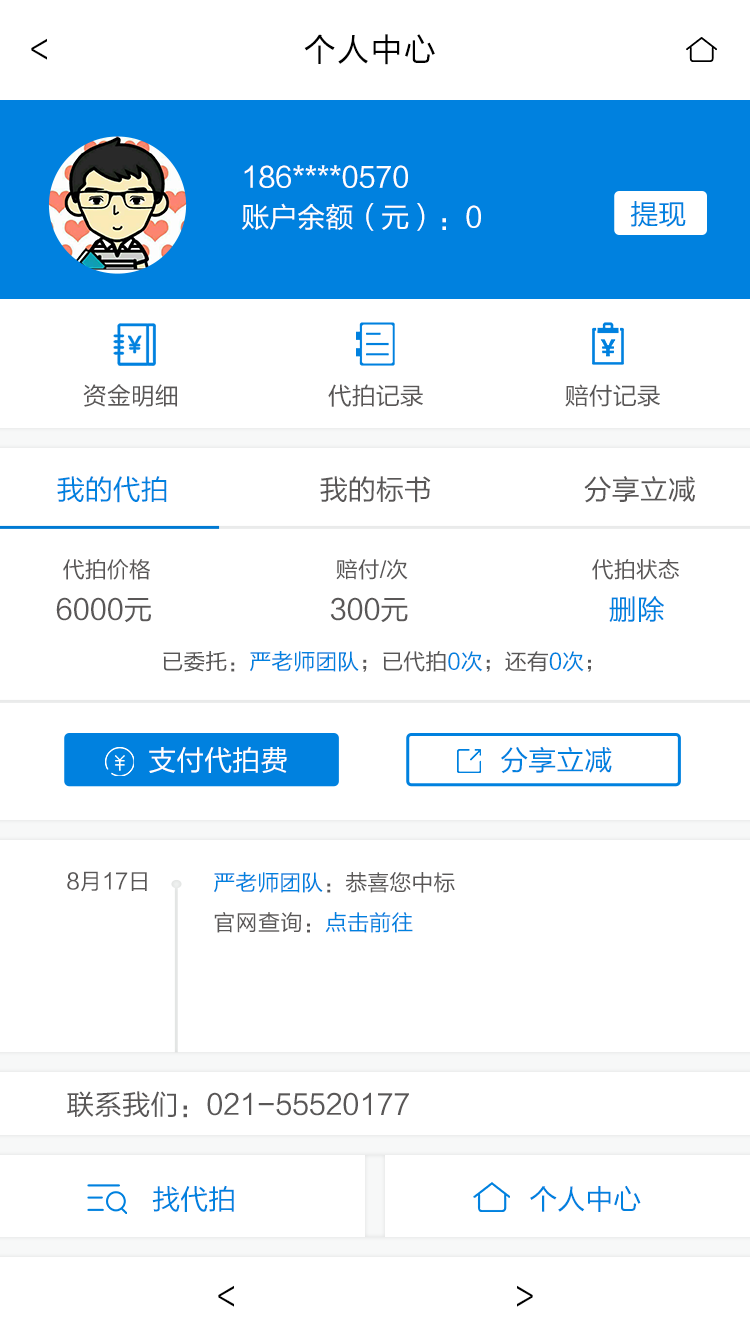
<style>
.page{position:relative;width:750px;height:1334px;background:#ffffff}
.page>*{position:absolute;margin:0}
.t1{font:30px "FZLTHJW--GB1-0";letter-spacing:0.05em;color:#000000}
.t2{font:32px "FZLTHJW--GB1-0";letter-spacing:0.05em;color:#000000}
.t3{font:28px/40px "FZLTHJW--GB1-0";color:#ffffff}
.t4{font:28px "FZLTHJW--GB1-0";color:#0081df}
.t5{font:24px "FZLTHJW--GB1-0";color:#595757}
.t6{font:28px "FZLTHJW--GB1-0";color:#595757}
.t7{font:22px "FZLTHJW--GB1-0";color:#595757}
.t8{font:22px "FZLTHJW--GB1-0";color:#0081df}
.t9{font:28px "FZLTHJW--GB1-0";color:#ffffff}
.t10{font:22px/40px "FZLTHJW--GB1-0";color:#595757}
.t11{font:22px/40px "FZLTHJW--GB1-0";color:#0081df}
.t12{font:22px/40px "FZLTHJW--GB1-0";letter-spacing:0.02em;color:#595757}
</style>
<div class="page">
<p class="t1" style="left:31px;top:38px;width:16px;height:22px;rotate:180deg">&gt;</p>
<p class="t2" style="left:304px;top:34px;width:131px;height:31px">个人中心</p>
<p class="t3" style="left:242px;top:165px;width:239px;height:66px">186****0570<br>账户余额（元）：0</p>
<p class="t4" style="left:631px;top:201px;width:55px;height:26px">提现</p>
<p class="t5" style="left:83px;top:384px;width:94px;height:23px">资金明细</p>
<p class="t5" style="left:328px;top:384px;width:95px;height:23px">代拍记录</p>
<p class="t5" style="left:565px;top:384px;width:95px;height:23px">赔付记录</p>
<p class="t4" style="left:57px;top:476px;width:110px;height:27px">我的代拍</p>
<p class="t6" style="left:320px;top:476px;width:111px;height:27px">我的标书</p>
<p class="t6" style="left:584px;top:476px;width:111px;height:27px">分享立减</p>
<p class="t7" style="left:63px;top:559px;width:87px;height:21px">代拍价格</p>
<p class="t7" style="left:336px;top:559px;width:72px;height:21px">赔付/次</p>
<p class="t7" style="left:592px;top:559px;width:87px;height:21px">代拍状态</p>
<p class="t6" style="left:56px;top:597px;width:95px;height:26px">6000元</p>
<p class="t6" style="left:330px;top:597px;width:78px;height:26px">300元</p>
<p class="t4" style="left:609px;top:596px;width:55px;height:26px">删除</p>
<p class="t8" style="left:163px;top:651px;width:428px;height:21px"><span class="t7">已委托：</span>严老师团队<span class="t7">；已代拍</span>0次<span class="t7">；还有</span>0次<span class="t7">；</span></p>
<p class="t9" style="left:149px;top:746px;width:138px;height:27px">支付代拍费</p>
<p class="t4" style="left:501px;top:746px;width:111px;height:28px">分享立减</p>
<p class="t7" style="left:67px;top:871px;width:80px;height:21px">8月17日</p>
<p class="t10" style="left:214px;top:872px;width:241px;height:61px"><span class="t11">严老师团队</span>：恭喜您中标<br><span class="t12">官网查询</span>：<span class="t11">点击前往</span></p>
<p class="t6" style="left:67px;top:1091px;width:342px;height:27px">联系我们：021-55520177</p>
<p class="t4" style="left:152px;top:1185px;width:82px;height:27px">找代拍</p>
<p class="t4" style="left:530px;top:1185px;width:111px;height:27px">个人中心</p>
<p class="t1" style="left:218px;top:1285px;width:16px;height:22px;rotate:180deg">&gt;</p>
<p class="t1" style="left:517px;top:1285px;width:16px;height:22px">&gt;</p>
</div>
